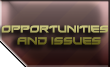
<style>
.page{position:relative;width:110px;height:67px}
.page>*{position:absolute;margin:0}
.t1{font:9.5px "Xirod-Regular";scale:0.96 1}
.t2{font:10px "Xirod-Regular";scale:0.96 1}
</style>
<div class="page">
<p class="t1" style="left:1px;top:25px;width:107px;height:20px">OPPORTUNITIES<br><span class="t2">    AND ISSUES</span></p>
</div>
